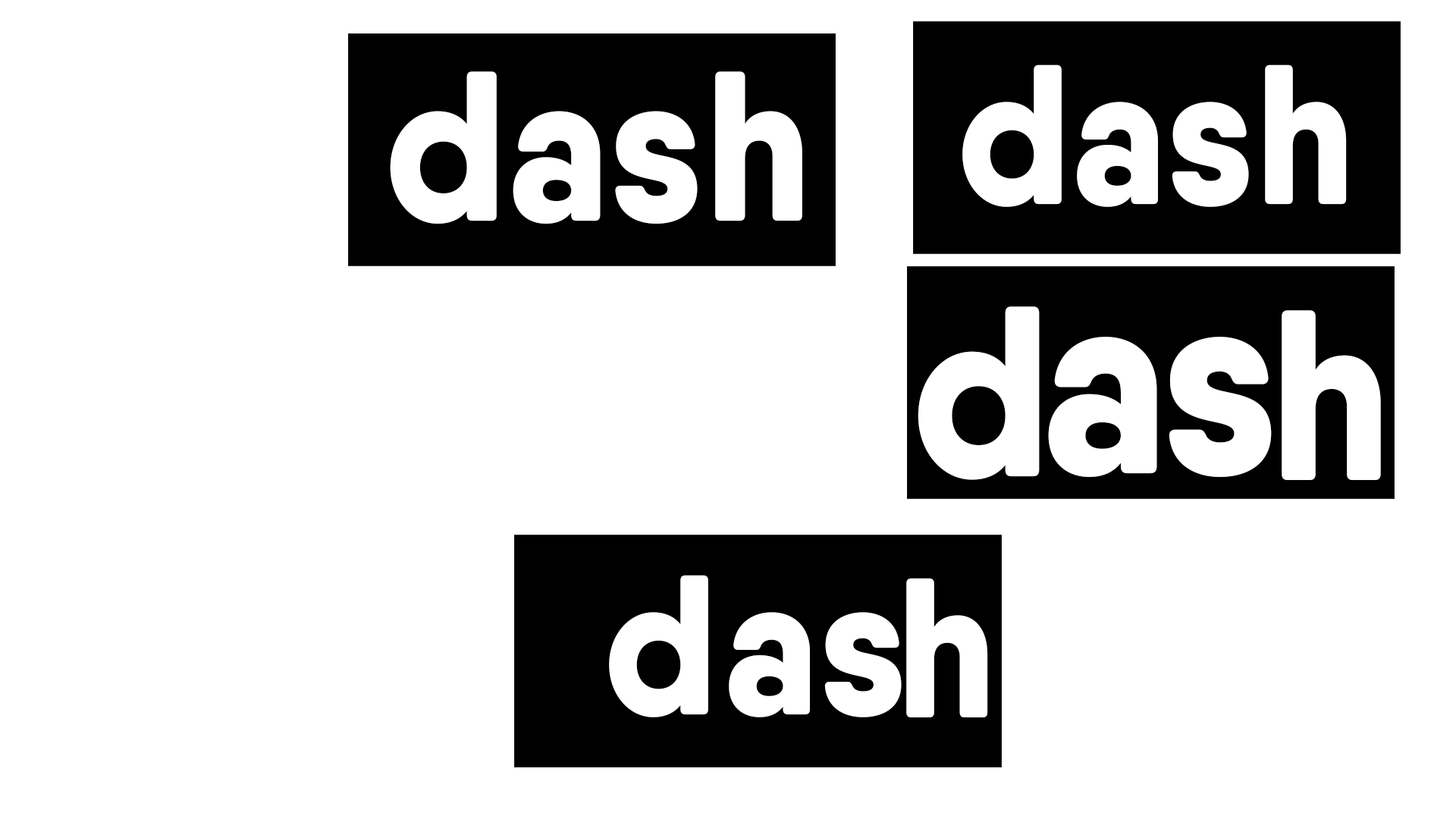
<style>
.page{position:relative;width:1456px;height:819px;background:#ffffff}
.page>*{position:absolute;margin:0}
.t1{font:198.4px "QanelasSoftDEMO-ExtraBold";color:#ffffff;scale:0.93 1}
.t2{font:212.9px "QanelasSoftDEMO-ExtraBold";color:#ffffff;scale:0.93 1}
.t3{font:242.3px "QanelasSoftDEMO-ExtraBold";color:#ffffff;scale:0.93 1}
.t4{font:265.2px "QanelasSoftDEMO-ExtraBold";color:#ffffff;scale:0.93 1}
</style>
<div class="page">
<p class="t1" style="left:962px;top:64px;width:385px;height:143px">dash</p>
<p class="t2" style="left:390px;top:71px;width:412px;height:153px">dash</p>
<p class="t3" style="left:918px;top:306px;width:122px;height:174px">d</p>
<p class="t3" style="left:1282px;top:310px;width:99px;height:170px">h</p>
<p class="t4" style="left:1048px;top:337px;width:109px;height:140px">a</p>
<p class="t4" style="left:1169px;top:337px;width:103px;height:140px">s</p>
<p class="t1" style="left:609px;top:575px;width:99px;height:142px">d</p>
<p class="t1" style="left:906px;top:578px;width:82px;height:139px">h</p>
<p class="t1" style="left:729px;top:612px;width:81px;height:105px">a</p>
<p class="t1" style="left:824px;top:612px;width:78px;height:105px">s</p>
</div>
